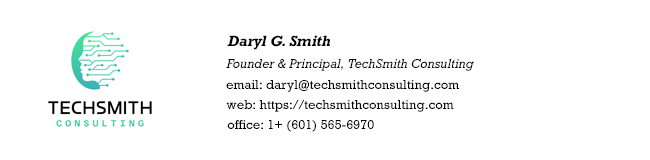
<style>
.page{position:relative;width:650px;height:160px;background:#ffffff}
.page>*{position:absolute;margin:0}
.t1{font:14px "Rockwell-BoldItalic";color:#000000}
.t2{font:12px "Rockwell-Italic";color:#000000}
.t3{font:12px "Rockwell-Regular";color:#000000}
</style>
<div class="page">
<p class="t1" style="left:227px;top:35px;width:103px;height:15px">Daryl G. Smith</p>
<p class="t2" style="left:226px;top:59px;width:248px;height:12px">Founder &amp; Principal, TechSmith Consulting</p>
<p class="t3" style="left:226px;top:80px;width:233px;height:12px">email: daryl@techsmithconsulting.com</p>
<p class="t3" style="left:226px;top:100px;width:228px;height:12px">web: https://techsmithconsulting.com</p>
<p class="t3" style="left:227px;top:120px;width:147px;height:12px">office: 1+ (601) 565-6970</p>
</div>
